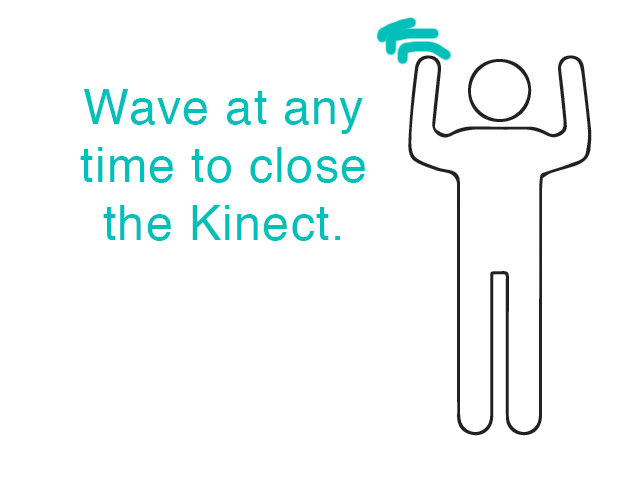
<style>
.page{position:relative;width:640px;height:480px;background:#ffffff}
.page>*{position:absolute;margin:0}
.t1{font:48.6px "Helvetica";letter-spacing:0.025em;color:#02c0b9}
</style>
<div class="page">
<p class="t1" style="left:80px;top:89px;width:285px;height:152px;text-align:center">Wave at any time to close the Kinect.</p>
</div>
